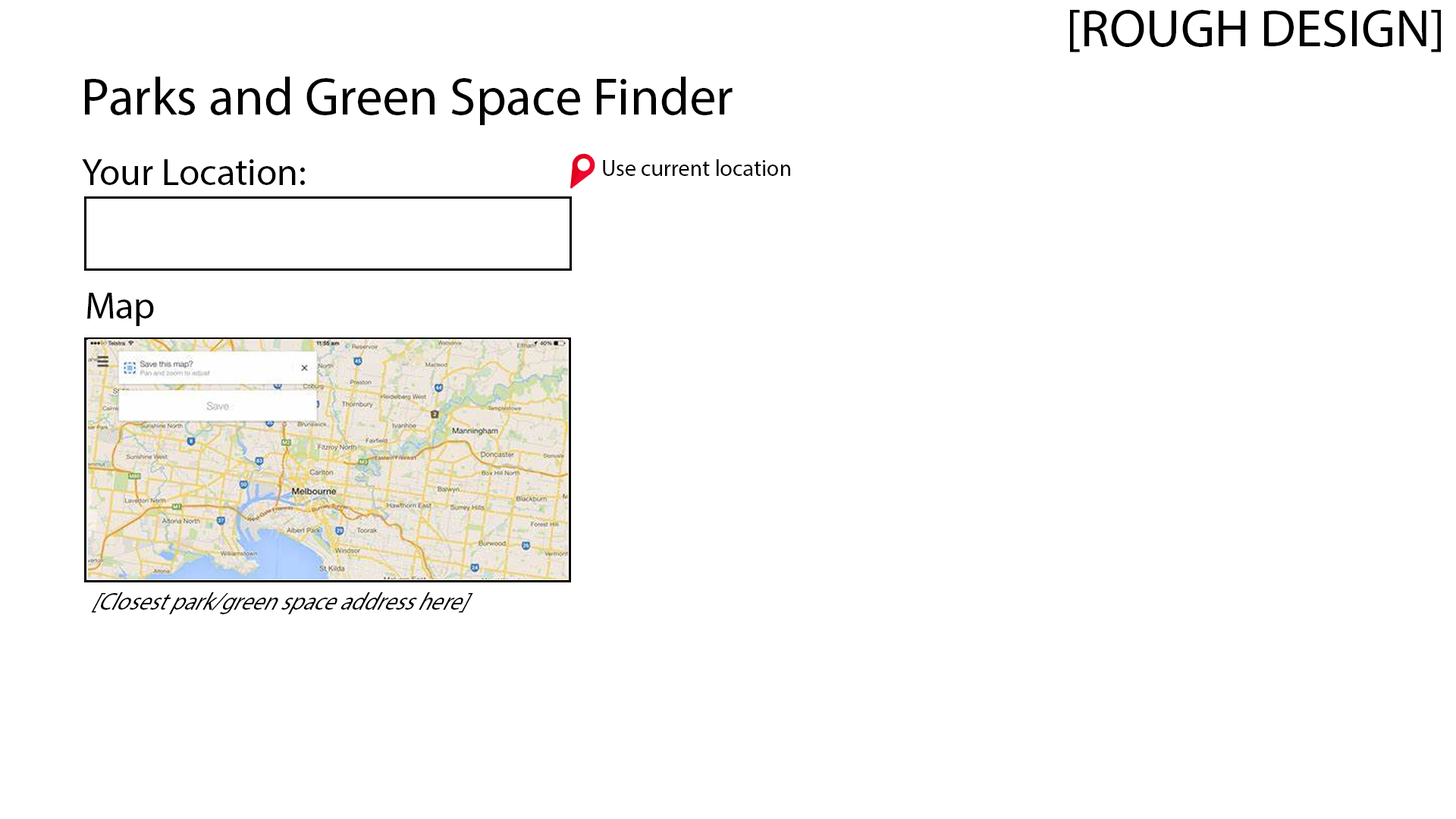
<style>
.page{position:relative;width:1456px;height:819px;background:#ffffff}
.page>*{position:absolute;margin:0}
.t1{font:53.1px "MyriadPro-Regular";color:#000000}
.t2{font:37.9px "MyriadPro-Regular";color:#000000}
.t3{font:22.7px "MyriadPro-Regular";color:#000000}
.t4{font:26.9px "MyriadPro-Regular";color:#000000;scale:0.85 1}
</style>
<div class="page">
<p class="t1" style="left:1070px;top:10px;width:371px;height:42px">[ROUGH DESIGN]</p>
<p class="t1" style="left:85px;top:77px;width:648px;height:48px">Parks and Green Space Finder</p>
<p class="t2" style="left:82px;top:159px;width:223px;height:26px">Your Location:</p>
<p class="t3" style="left:603px;top:159px;width:187px;height:17px">Use current location</p>
<p class="t2" style="left:87px;top:293px;width:67px;height:33px">Map</p>
<p class="t4" style="left:91px;top:592px;width:382px;height:22px">[Closest park/green space address here]</p>
</div>
